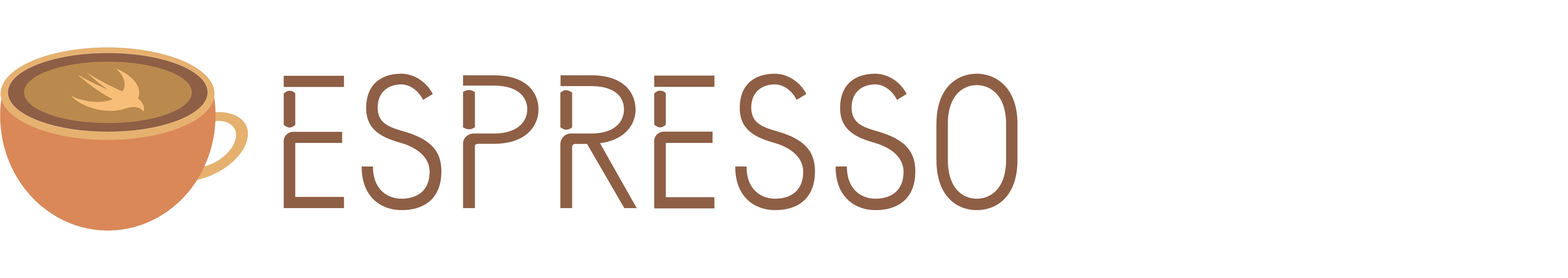
<style>
.page{position:relative;width:1568px;height:278px;background:#ffffff}
.page>*{position:absolute;margin:0}
.t1{font:188.2px "CapsuleXProMediumUC";letter-spacing:0.02em;color:#8e5f45}
</style>
<div class="page">
<p class="t1" style="left:283px;top:73px;width:735px;height:137px">Espresso</p>
</div>
